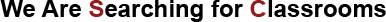
<style>
.page{position:relative;width:386px;height:22px;background:#ffffff}
.page>*{position:absolute;margin:0}
.t1{font:24px "Arial-BoldMT";color:#000000}
.t2{font:24px "Arial-BoldMT";color:#971a1d}
</style>
<div class="page">
<p class="t1" style="left:0px;top:0px;width:386px;height:22px">We Are <span class="t2">S</span>earching for <span class="t2">C</span>lassrooms</p>
</div>
